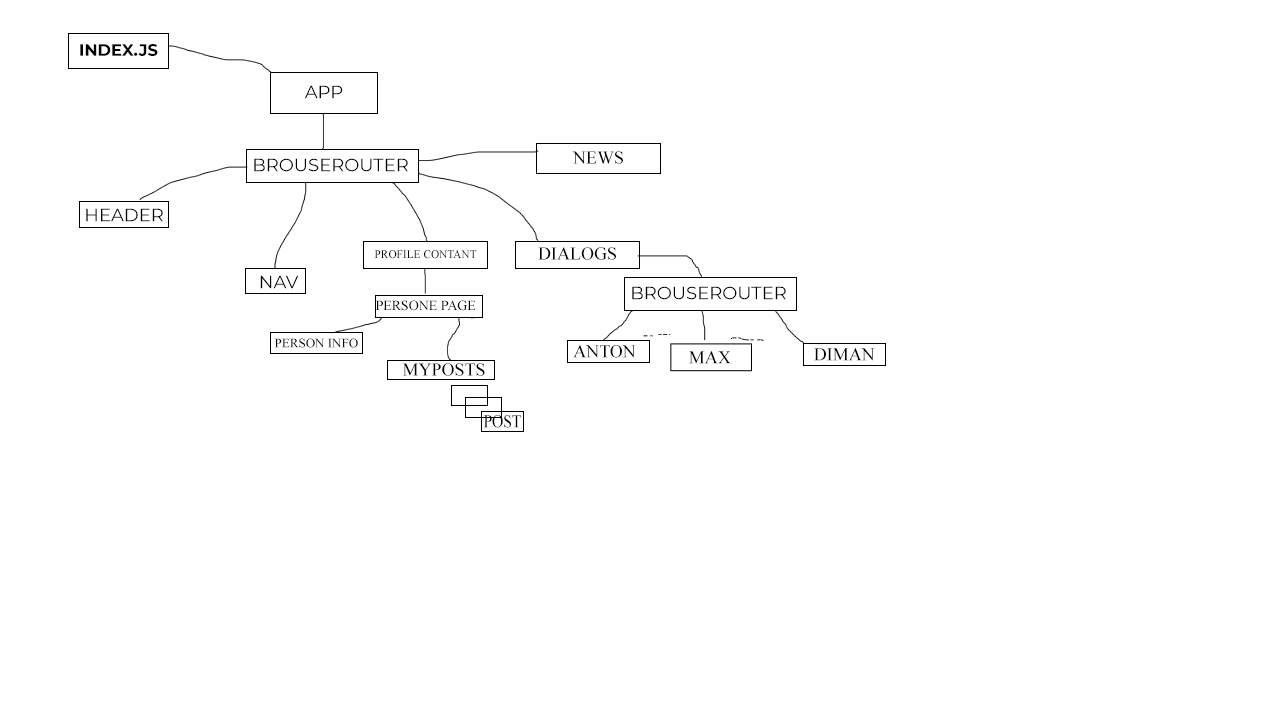
<style>
.page{position:relative;width:1280px;height:720px;background:#ffffff}
.page>*{position:absolute;margin:0}
.t1{font:16.3px "Montserrat-Bold";color:#010000;text-transform:uppercase}
.t2{font:18px "Montserrat-Regular";color:#000000;text-transform:uppercase}
.t3{font:18px "TimesNewRomanPSMT";color:#000000;text-transform:uppercase}
.t4{font:11.3px "TimesNewRomanPSMT";color:#000000;text-transform:uppercase}
.t5{font:13.9px "TimesNewRomanPSMT";color:#000000;text-transform:uppercase}
.t6{font:13px "TimesNewRomanPSMT";color:#000000;text-transform:uppercase}
.t7{font:18px "TimesNewRomanPSMT";color:#000000;text-transform:uppercase;scale:0.86 1}
</style>
<div class="page">
<p class="t1" style="left:80px;top:44px;width:78px;height:12px">index.js</p>
<p class="t2" style="left:304px;top:85px;width:39px;height:14px">App</p>
<p class="t2" style="left:254px;top:158px;width:154px;height:14px">BrouseRouter</p>
<p class="t3" style="left:572px;top:151px;width:51px;height:13px">News</p>
<p class="t2" style="left:86px;top:208px;width:77px;height:14px">header</p>
<p class="t4" style="left:374px;top:250px;width:103px;height:9px">Profile Contant</p>
<p class="t3" style="left:538px;top:247px;width:78px;height:13px">Dialogs</p>
<p class="t2" style="left:260px;top:275px;width:39px;height:14px">NAv</p>
<p class="t2" style="left:632px;top:286px;width:154px;height:14px">BrouseRouter</p>
<p class="t5" style="left:375px;top:300px;width:101px;height:11px">Persone PAge</p>
<p class="t6" style="left:274px;top:338px;width:84px;height:10px">Person Info</p>
<p class="t3" style="left:573px;top:345px;width:63px;height:13px">Anton</p>
<p class="t3" style="left:689px;top:351px;width:42px;height:13px">Max</p>
<p class="t3" style="left:814px;top:348px;width:61px;height:13px">Diman</p>
<p class="t3" style="left:402px;top:363px;width:83px;height:13px">MyPosts</p>
<p class="t7" style="left:483px;top:415px;width:38px;height:13px">Post</p>
</div>
